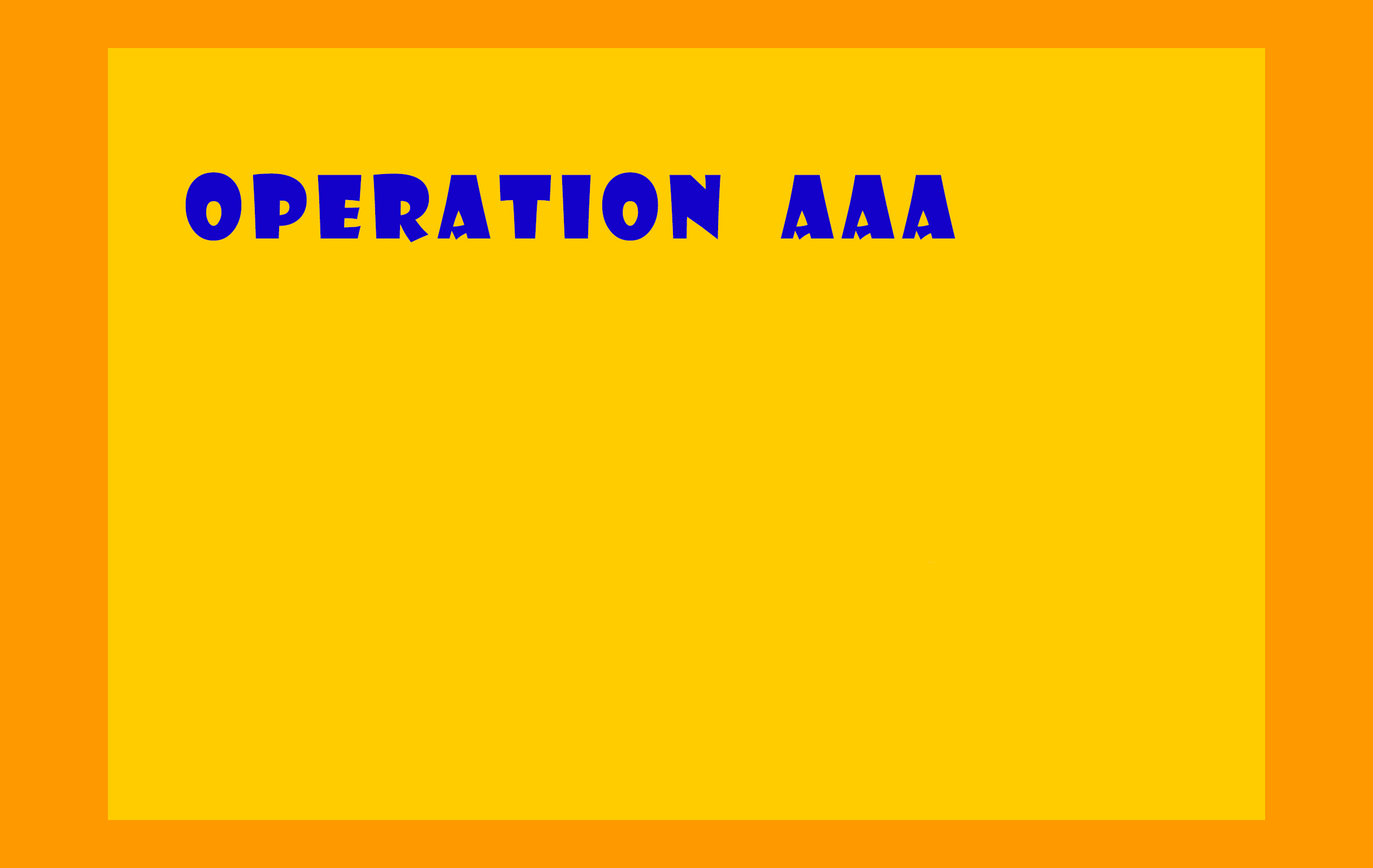
<style>
.page{position:relative;width:1373px;height:868px;background:#ffcc00}
.page>*{position:absolute;margin:0}
.t1{font:84.8px "ShowcardGothic-Reg";letter-spacing:0.1em;color:#1300c9;text-transform:uppercase}
</style>
<div class="page">
<p class="t1" style="left:185px;top:172px;width:771px;height:70px">OPERATION  AAA</p>
</div>
